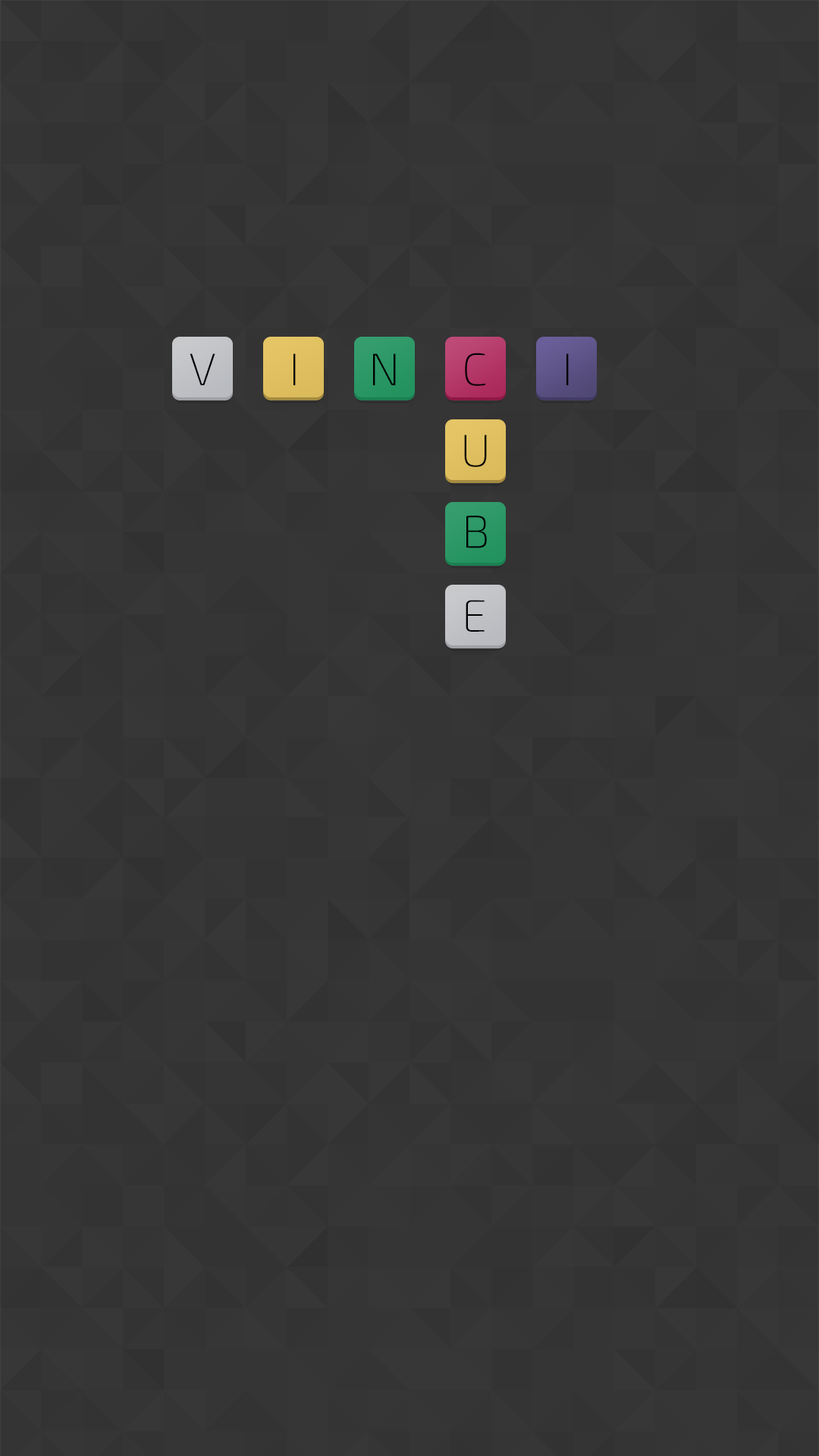
<style>
.page{position:relative;width:819px;height:1456px;background:#353535}
.page>*{position:absolute;margin:0}
.t1{font:45.5px "Exo2.0-ExtraLight";letter-spacing:0.005em;color:#000000}
</style>
<div class="page">
<p class="t1" style="left:190px;top:353px;width:25px;height:32px">V</p>
<p class="t1" style="left:293px;top:353px;width:3px;height:32px">I</p>
<p class="t1" style="left:373px;top:353px;width:23px;height:32px">N</p>
<p class="t1" style="left:465px;top:353px;width:21px;height:33px">C</p>
<p class="t1" style="left:566px;top:353px;width:3px;height:32px">I</p>
<p class="t1" style="left:464px;top:435px;width:23px;height:32px">U</p>
<p class="t1" style="left:466px;top:516px;width:21px;height:32px">B</p>
<p class="t1" style="left:466px;top:600px;width:19px;height:32px">E</p>
</div>
